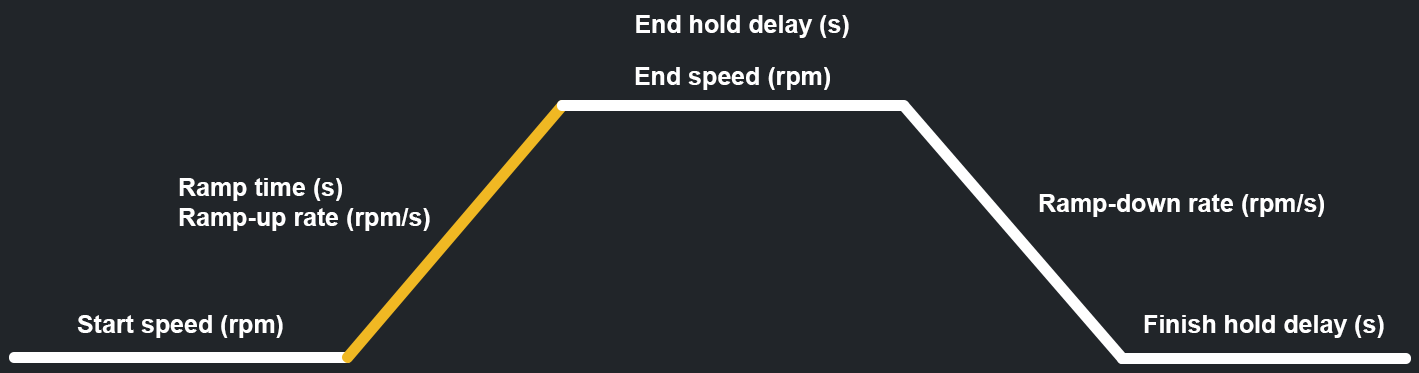
<style>
.page{position:relative;width:1419px;height:373px;background:#212529}
.page>*{position:absolute;margin:0}
.t1{font:25px "Arial-BoldMT";color:#ffffff}
</style>
<div class="page">
<p class="t1" style="left:636px;top:15px;width:213px;height:23px">End hold delay (s)</p>
<p class="t1" style="left:635px;top:67px;width:195px;height:23px">End speed (rpm)</p>
<p class="t1" style="left:179px;top:178px;width:251px;height:53px">Ramp time (s)<br>Ramp-up rate (rpm/s)</p>
<p class="t1" style="left:1039px;top:194px;width:285px;height:23px">Ramp-down rate (rpm/s)</p>
<p class="t1" style="left:77px;top:315px;width:206px;height:23px">Start speed (rpm)</p>
<p class="t1" style="left:1144px;top:315px;width:240px;height:23px">Finish hold delay (s)</p>
</div>
